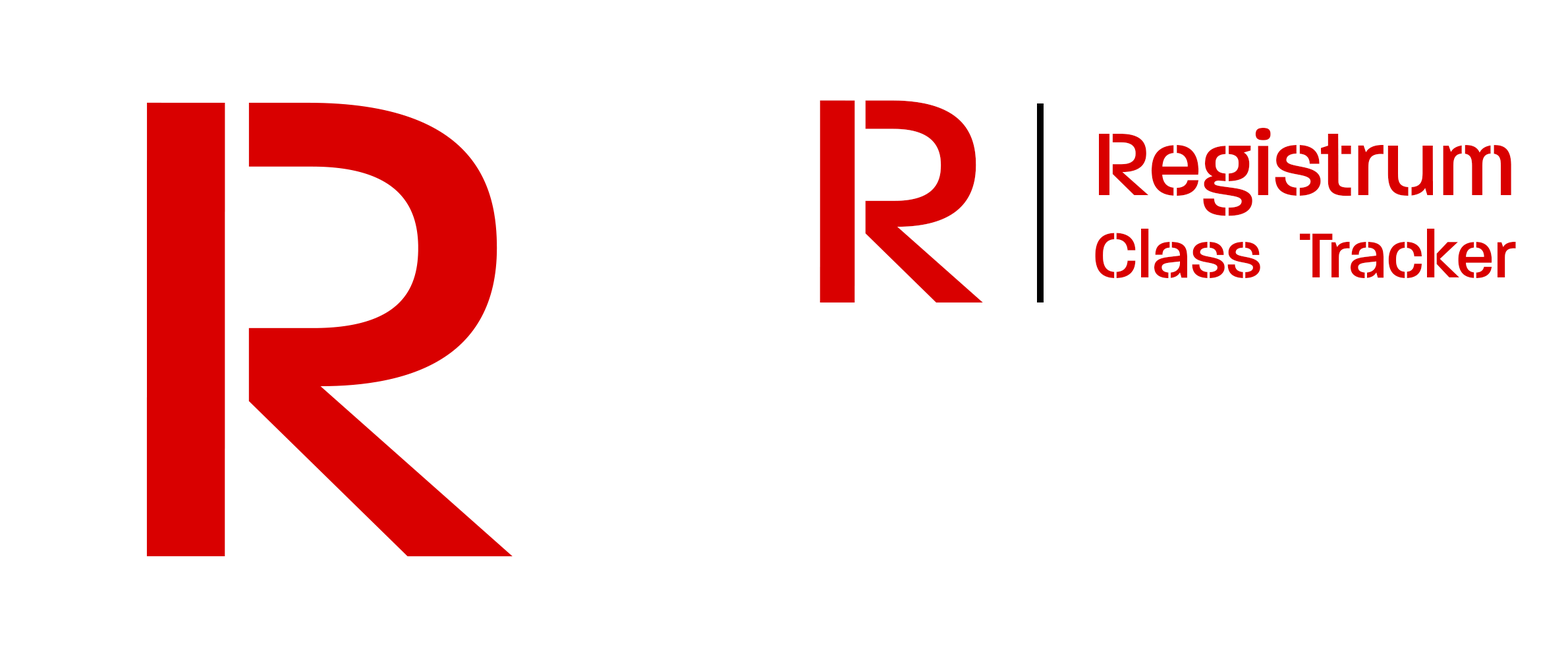
<style>
.page{position:relative;width:1568px;height:659px;background:#ffffff}
.page>*{position:absolute;margin:0}
.t1{font:315.6px "ParalucentStencil-Medium";color:#d90000}
.t2{font:708.3px "ParalucentStencil-Medium";color:#d90000}
.t3{font:68.6px "ParalucentStencil-Medium";color:#d90000}
.t4{font:96.1px "ParalucentStencil-Medium";color:#d90000}
</style>
<div class="page">
<p class="t1" style="left:820px;top:100px;width:163px;height:203px">R</p>
<p class="t2" style="left:146px;top:102px;width:367px;height:455px">R</p>
<p class="t3" style="left:1095px;top:128px;width:421px;height:150px"><span class="t4">Registrum<br></span>Class  Tracker</p>
</div>
